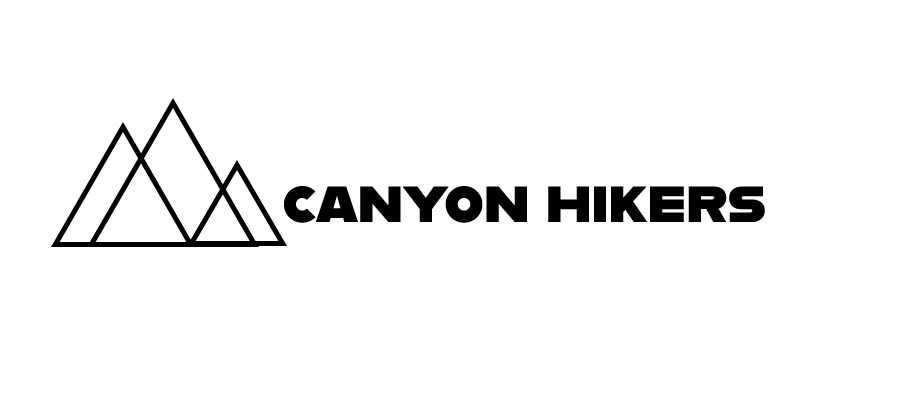
<style>
.page{position:relative;width:900px;height:400px;background:#ffffff}
.page>*{position:absolute;margin:0}
.t1{font:58.3px "Alfarn";color:#010101}
</style>
<div class="page">
<p class="t1" style="left:284px;top:186px;width:481px;height:37px">canyon hikers</p>
</div>
